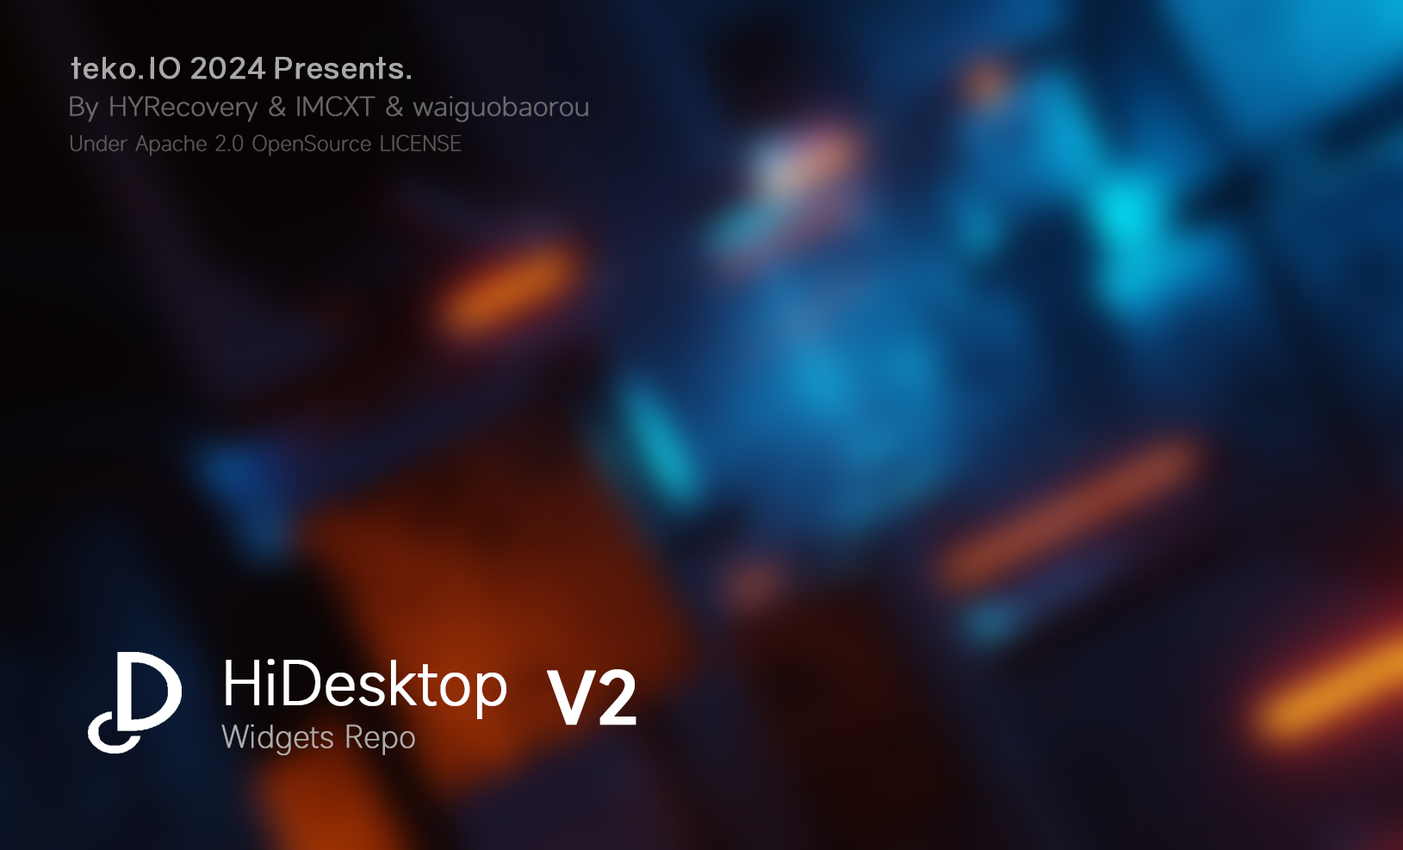
<style>
.page{position:relative;width:1403px;height:850px}
.page>*{position:absolute;margin:0}
.t1{font:28.7px "Gravity-Regular";color:#a9a9a9;font-weight:bold;scale:1.05 1}
.t2{font:25px "MiSans-ExtraLight";color:#676667;font-weight:bold;scale:1.06 1}
.t3{font:20.6px "MiSans-ExtraLight";color:#595758;font-weight:bold}
.t4{font:58.8px "MiSans-Light";color:#ffffff;font-weight:bold}
.t5{font:69.1px "MiSans-Medium";color:#ffffff;font-weight:bold}
.t6{font:30.1px "MiSans-ExtraLight";color:#afabaa;font-weight:bold}
</style>
<div class="page">
<p class="t1" style="left:71px;top:57px;width:340px;height:22px">teko.IO 2024 Presents.</p>
<p class="t2" style="left:70px;top:96px;width:518px;height:26px">By HYRecovery &amp; IMCXT &amp; waiguobaorou</p>
<p class="t3" style="left:70px;top:134px;width:392px;height:22px">Under Apache 2.0 OpenSource LICENSE</p>
<p class="t4" style="left:226px;top:659px;width:280px;height:60px">HiDesktop</p>
<p class="t5" style="left:547px;top:669px;width:89px;height:56px">V2</p>
<p class="t6" style="left:221px;top:724px;width:194px;height:31px">Widgets Repo</p>
</div>
